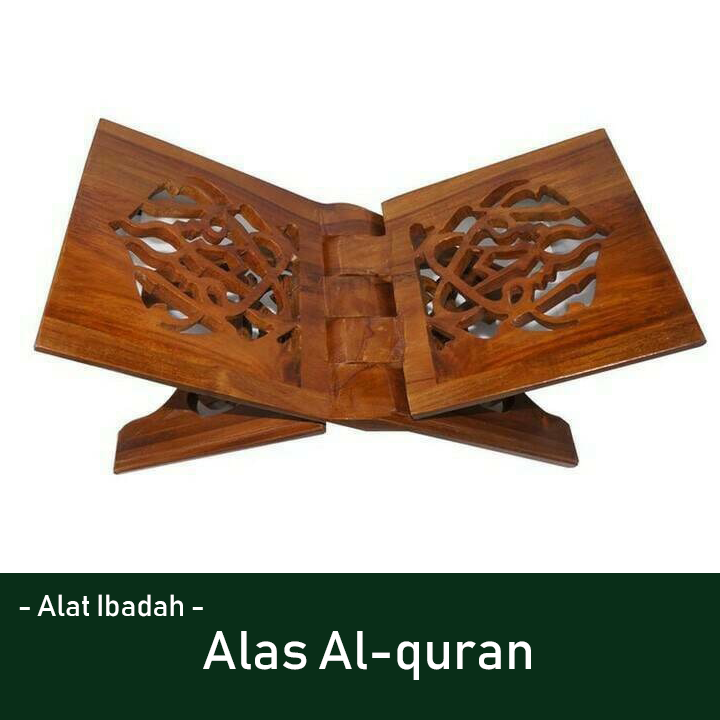
<style>
.page{position:relative;width:720px;height:720px;background:#ffffff}
.page>*{position:absolute;margin:0}
.t1{font:30px "Bahnschrift";color:#ffffff}
.t2{font:53.6px "Bahnschrift";color:#ffffff}
</style>
<div class="page">
<p class="t1" style="left:19px;top:594px;width:184px;height:23px">- Alat Ibadah -</p>
<p class="t2" style="left:203px;top:631px;width:328px;height:49px">Alas Al-quran</p>
</div>
